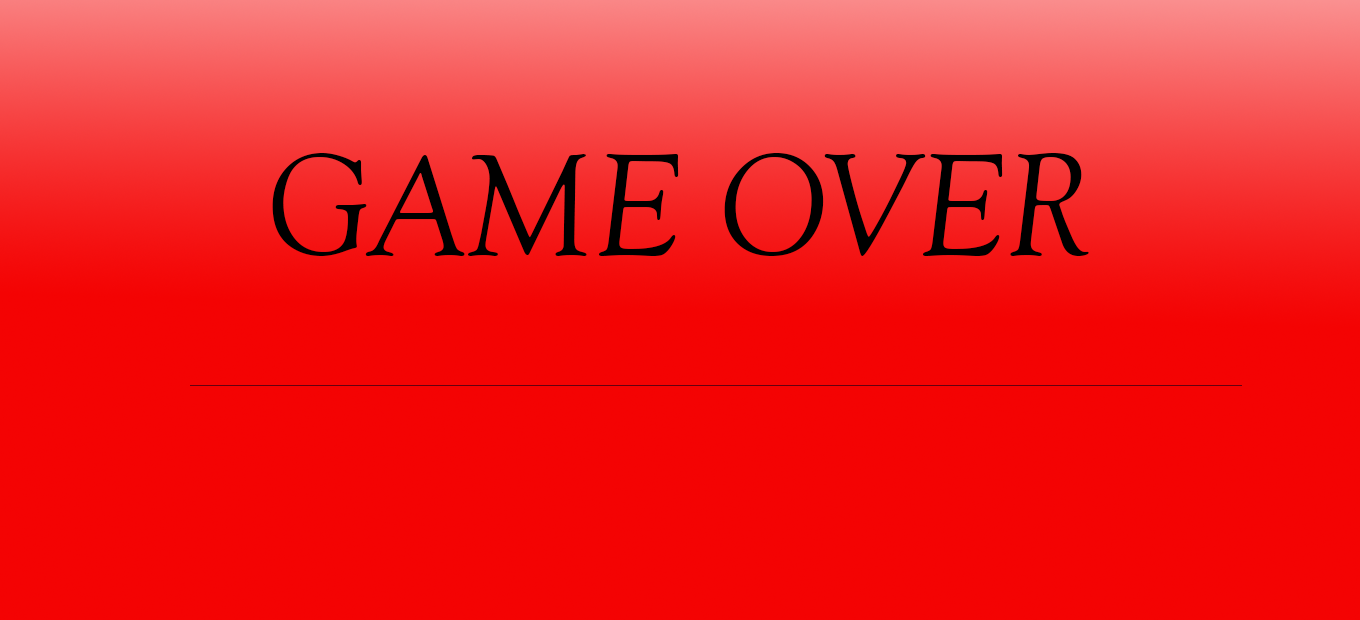
<style>
.page{position:relative;width:1360px;height:620px;background:#f40303}
.page>*{position:absolute;margin:0}
.t1{font:150px "GoudyOldStyleT-Italic";color:#000000}
</style>
<div class="page">
<p class="t1" style="left:272px;top:153px;width:817px;height:103px">GAME OVER</p>
</div>
